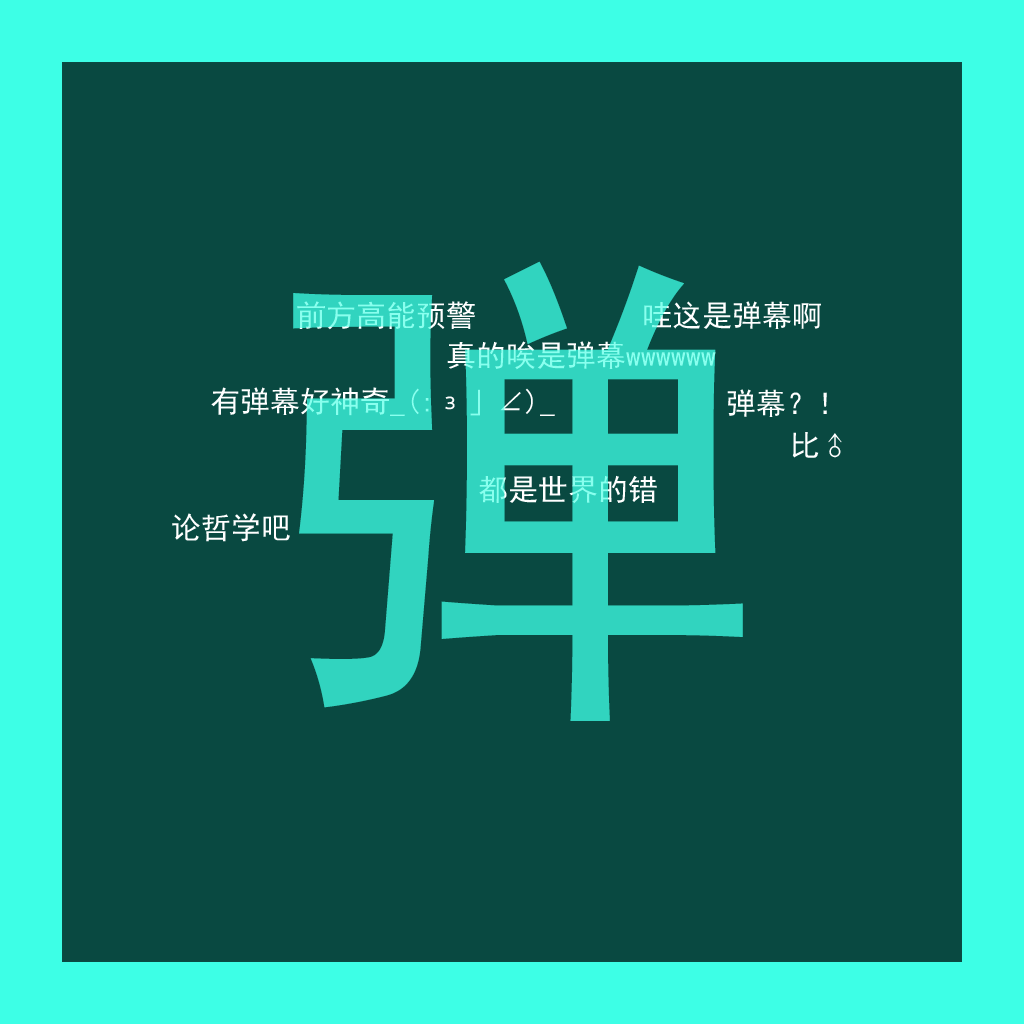
<style>
.page{position:relative;width:1024px;height:1024px;background:#094941}
.page>*{position:absolute;margin:0}
.t1{font:500px "SimHei";color:#31d4bf}
.t2{font:30px "SimHei"}
.t3{font:30px "SimHei";color:#ffffff}
.t4{font:30px "SimHei";color:#89ffee}
</style>
<div class="page">
<p class="t1" style="left:293px;top:261px;width:450px;height:460px">弹</p>
<p class="t2" style="left:297px;top:301px;width:178px;height:29px">前方高能预警</p>
<p class="t3" style="left:644px;top:301px;width:177px;height:28px">哇这是弹幕啊</p>
<p class="t4" style="left:447px;top:341px;width:269px;height:29px">真的唉是弹幕wwwwww</p>
<p class="t2" style="left:211px;top:387px;width:344px;height:29px">有弹幕好神奇_(:з」∠)_</p>
<p class="t3" style="left:727px;top:389px;width:100px;height:28px">弹幕？！</p>
<p class="t3" style="left:792px;top:432px;width:50px;height:26px">比♂</p>
<p class="t2" style="left:479px;top:475px;width:178px;height:29px">都是世界的错</p>
<p class="t3" style="left:172px;top:513px;width:118px;height:29px">论哲学吧</p>
</div>
